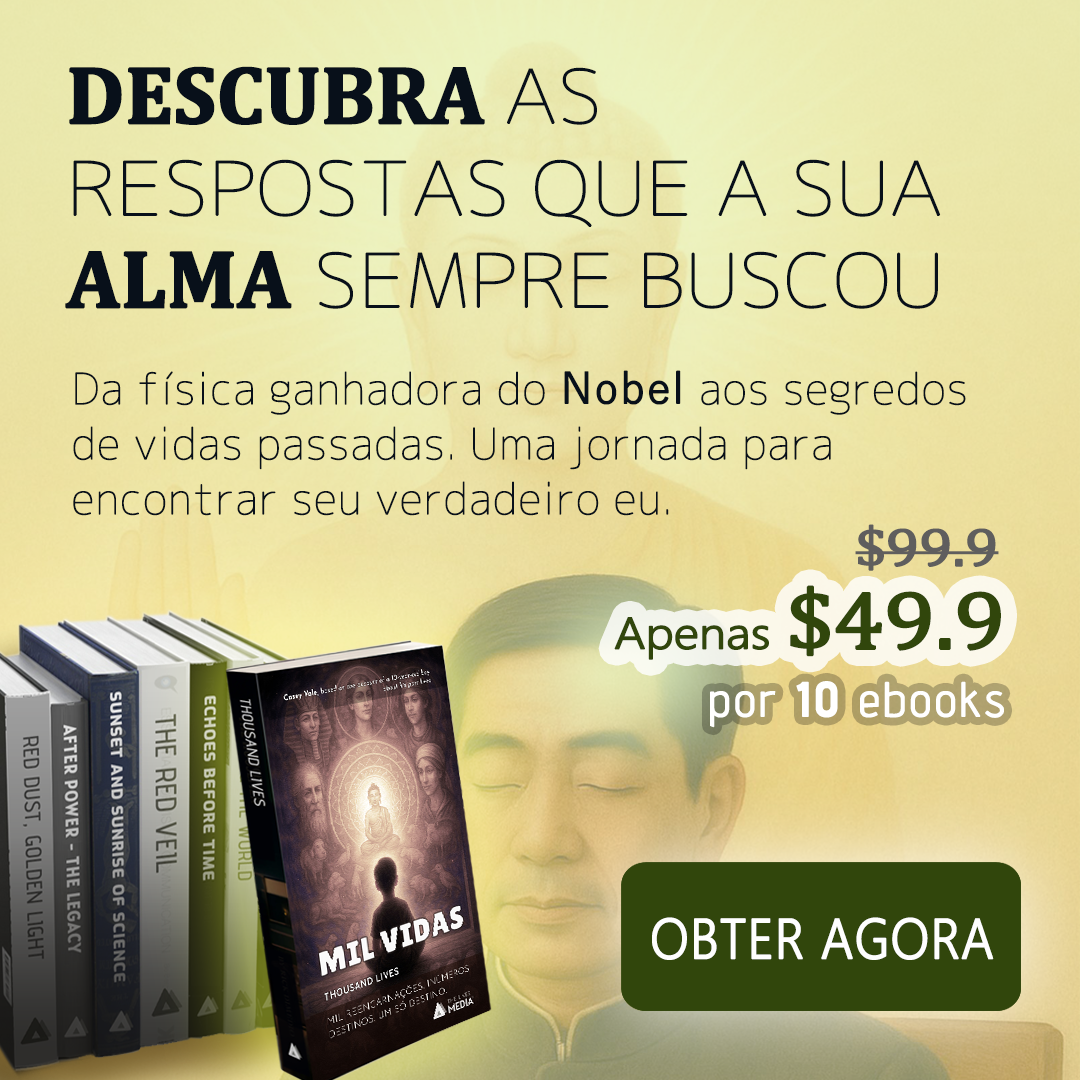
<style>
.page{position:relative;width:1080px;height:1080px}
.page>*{position:absolute;margin:0}
.t1{font:73.8px/92px "Chogokuboso-Gothic";letter-spacing:-0.015em;color:#08101a;font-weight:bold;scale:1.11 1}
.t2{font:82px/92px "Cambria-Bold";letter-spacing:-0.015em;color:#08101a;font-weight:bold}
.t3{font:43.2px/55px "Chogokuboso-Gothic";letter-spacing:0.01em;color:#08101a;font-weight:bold}
.t4{font:43.2px/55px "YuGothic-Regular";letter-spacing:0.01em;color:#08101a;font-weight:bold}
.t5{font:54px "Cambria";letter-spacing:-0.025em;color:#5f5e5e;font-weight:bold;scale:1.11 1}
.t6{font:43.2px "MalgunGothic-Semilight";letter-spacing:-0.025em;color:#31460c;font-weight:bold;scale:1.11 1}
.t7{font:54px "Cambria";letter-spacing:-0.025em;color:#31460c;font-weight:bold;scale:1.11 1}
.t8{font:82.8px "Cambria";letter-spacing:-0.025em;color:#31460c;font-weight:bold;scale:1.11 1}
.t9{font:48px "AdventPro-Regular";letter-spacing:0.05em;color:#ffffff;font-weight:bold}
.t10{font:48px "AdventPro-Bold";letter-spacing:0.05em;color:#ffffff;font-weight:bold}
.t11{font:55px "MalgunGothic-Semilight";letter-spacing:0.005em;color:#fefefe;font-weight:bold;scale:0.9 1}
</style>
<div class="page">
<p class="t1" style="left:65px;top:66px;width:876px;height:243px"><span class="t2">DESCUBRA </span>AS RESPOSTAS QUE A SUA <span class="t2">ALMA</span> SEMPRE BUSCOU</p>
<p class="t3" style="left:73px;top:370px;width:893px;height:146px">Da física ganhadora do <span class="t4">Nobel </span>aos segredos de vidas passadas. Uma jornada para encontrar seu verdadeiro eu.</p>
<p class="t5" style="left:855px;top:524px;width:144px;height:47px">$99.9</p>
<p class="t6" style="left:614px;top:585px;width:387px;height:75px"><span class="t7"><br></span>Apenas <span class="t8">$49.9</span></p>
<p class="t9" style="left:710px;top:681px;width:294px;height:47px">por <span class="t10">10</span> ebooks</p>
<p class="t11" style="left:652px;top:917px;width:342px;height:43px">OBTER AGORA</p>
</div>
